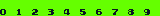
<style>
.page{position:relative;width:160px;height:16px;background:#65ff00}
.page>*{position:absolute;margin:0}
.t1{font:8px "Early-GameBoy";color:#071821}
</style>
<div class="page">
<p class="t1" style="left:0px;top:9px;width:150px;height:6px">0  1  2  3  4  5  6  7  8  9</p>
</div>
